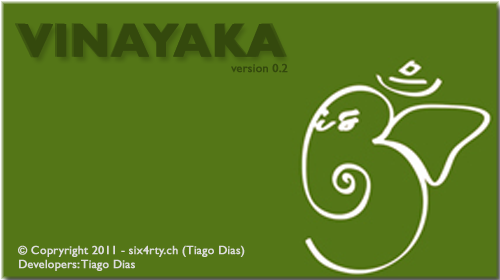
<style>
.page{position:relative;width:500px;height:280px;background:#547617}
.page>*{position:absolute;margin:0}
.t1{font:48px "GillSansMT-Bold";color:#34490d;font-weight:bold}
.t2{font:47px "GillSansMT-Bold";color:#34490d;font-weight:bold}
.t3{font:12px "GillSansMT";color:#34490d;font-weight:bold}
.t4{font:12px "GillSansMT";color:#dcdcdc;font-weight:bold}
</style>
<div class="page">
<p class="t1" style="left:15px;top:23px;width:272px;height:35px;opacity:0.6">VINAYAKA</p>
<p class="t2" style="left:18px;top:24px;width:266px;height:34px">VINAYAKA</p>
<p class="t3" style="left:231px;top:63px;width:57px;height:10px">version 0.2</p>
<p class="t4" style="left:18px;top:245px;width:227px;height:26px">© Copryright 2011 - six4rty.ch (Tiago Dias)<br>Developers: Tiago Dias</p>
</div>
